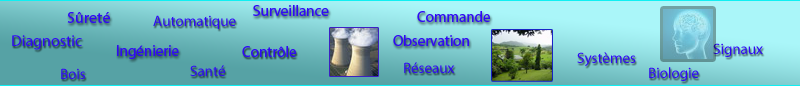
<style>
.page{position:relative;width:800px;height:86px}
.page>*{position:absolute;margin:0}
.t1{font:15px "MyriadPro-Regular";color:#3009f6}
.t2{font:16px "MyriadPro-Regular";color:#3009f6}
</style>
<div class="page">
<p class="t1" style="left:253px;top:5px;width:76px;height:11px">Surveillance</p>
<p class="t2" style="left:67px;top:12px;width:43px;height:11px">Sûreté</p>
<p class="t1" style="left:153px;top:15px;width:83px;height:14px">Automatique</p>
<p class="t1" style="left:417px;top:11px;width:73px;height:11px">Commande</p>
<p class="t2" style="left:12px;top:35px;width:70px;height:15px">Diagnostic</p>
<p class="t1" style="left:393px;top:35px;width:76px;height:11px">Observation</p>
<p class="t1" style="left:117px;top:45px;width:62px;height:14px">Ingénierie</p>
<p class="t1" style="left:242px;top:46px;width:54px;height:11px">Contrôle</p>
<p class="t1" style="left:577px;top:52px;width:59px;height:14px">Systèmes</p>
<p class="t1" style="left:713px;top:43px;width:50px;height:14px">Signaux</p>
<p class="t1" style="left:190px;top:65px;width:35px;height:11px">Santé</p>
<p class="t1" style="left:404px;top:62px;width:51px;height:11px">Réseaux</p>
<p class="t1" style="left:61px;top:68px;width:24px;height:11px">Bois</p>
<p class="t1" style="left:649px;top:67px;width:50px;height:14px">Biologie</p>
</div>
